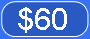
<style>
.page{position:relative;width:90px;height:39px;background:#2959c2}
.page>*{position:absolute;margin:0}
.t1{font:31.2px "ArialMT";color:#fefefe}
</style>
<div class="page">
<p class="t1" style="left:18px;top:7px;width:49px;height:26px">$60</p>
</div>
